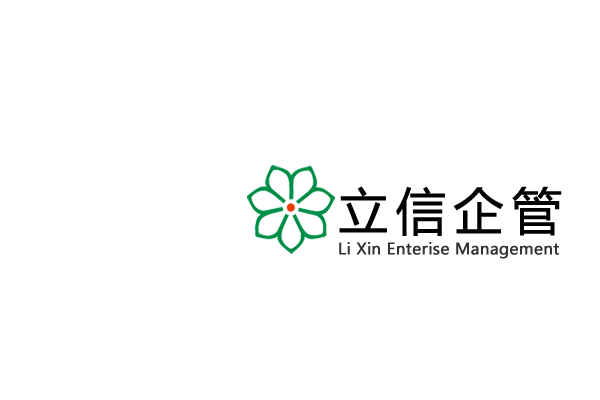
<style>
.page{position:relative;width:600px;height:400px;background:#ffffff}
.page>*{position:absolute;margin:0}
.t1{font:50px "YaHei-Consolas-Hybrid";letter-spacing:0.15em;color:#010101;font-weight:bold}
.t2{font:15.6px "MicrosoftYaHei";letter-spacing:0.005em;color:#333333;font-weight:bold}
</style>
<div class="page">
<p class="t1" style="left:339px;top:186px;width:223px;height:50px">立信企管</p>
<p class="t2" style="left:339px;top:242px;width:220px;height:17px">Li Xin Enterise Management</p>
</div>
